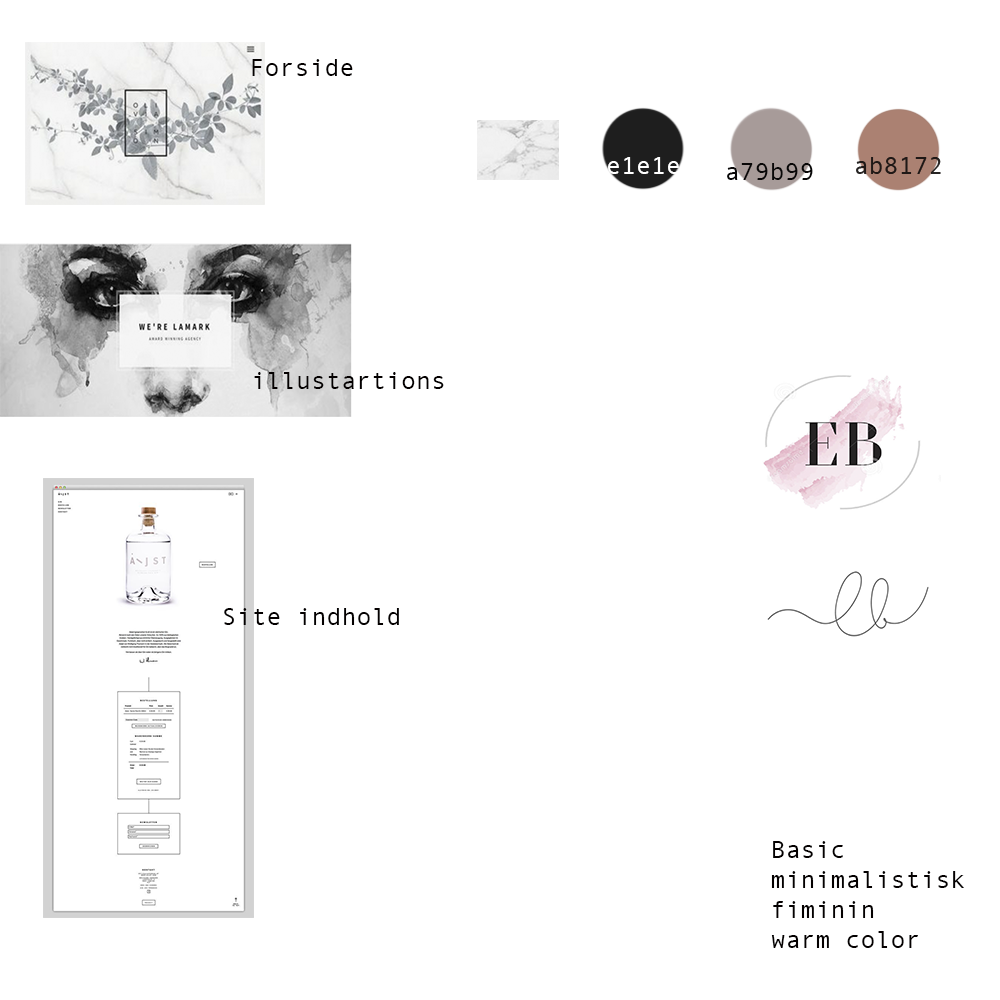
<style>
.page{position:relative;width:1000px;height:1000px;background:#ffffff}
.page>*{position:absolute;margin:0}
.t1{font:25px "AndaleMono";color:#040000}
.t2{font:25px "AndaleMono";color:#ffffff}
.t3{font:25px "AndaleMono";color:#080707}
</style>
<div class="page">
<p class="t1" style="left:252px;top:59px;width:101px;height:17px">Forside</p>
<p class="t2" style="left:594px;top:157px;width:85px;height:17px">1e1e1e</p>
<p class="t3" style="left:727px;top:163px;width:86px;height:17px">a79b99</p>
<p class="t1" style="left:254px;top:372px;width:190px;height:17px">illustartions</p>
<p class="t1" style="left:224px;top:608px;width:175px;height:17px">Site indhold</p>
<p class="t1" style="left:771px;top:841px;width:193px;height:107px">Basic<br>minimalistisk<br>fiminin<br>warm color</p>
</div>
